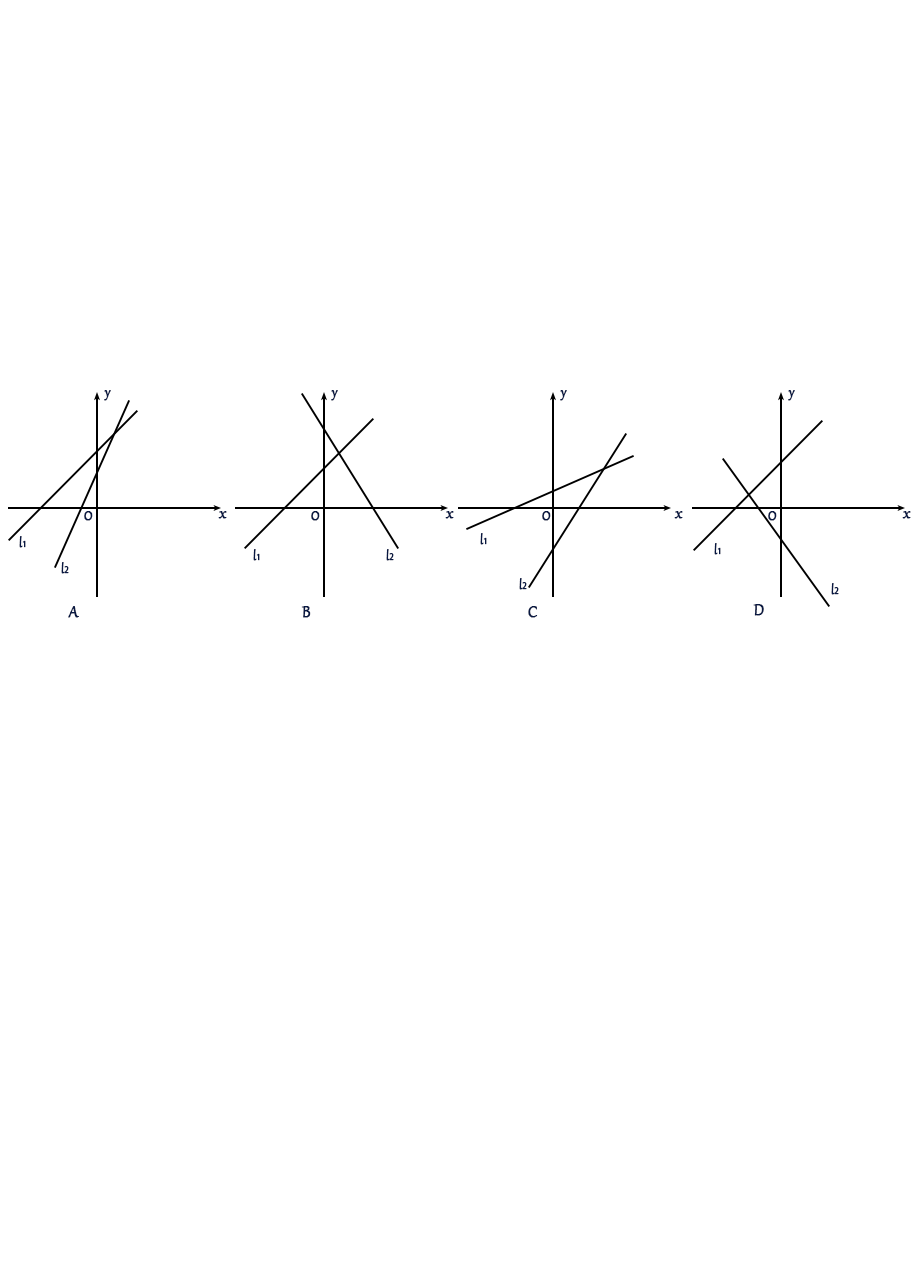
<style>
.page{position:relative;width:916px;height:1268px;background:#ffffff}
.page>*{position:absolute;margin:0}
.t1{font:16px "Gabriola";color:#081842;font-weight:bold}
.t2{font:18.7px "Gabriola";color:#081842;font-weight:bold}
.t3{font:12px "Gabriola";color:#081842;font-weight:bold}
.t4{font:8px "AdobeHeitiStd-Regular";color:#081842;font-weight:bold}
</style>
<div class="page">
<p class="t1" style="left:104px;top:390px;width:7px;height:11px">y</p>
<p class="t1" style="left:331px;top:390px;width:7px;height:11px">y</p>
<p class="t1" style="left:560px;top:390px;width:7px;height:11px">y</p>
<p class="t1" style="left:788px;top:390px;width:7px;height:11px">y</p>
<p class="t1" style="left:84px;top:511px;width:9px;height:10px">O</p>
<p class="t2" style="left:218px;top:511px;width:9px;height:8px">x</p>
<p class="t1" style="left:311px;top:511px;width:9px;height:10px">O</p>
<p class="t2" style="left:445px;top:511px;width:9px;height:8px">x</p>
<p class="t1" style="left:542px;top:511px;width:9px;height:10px">O</p>
<p class="t2" style="left:674px;top:511px;width:9px;height:8px">x</p>
<p class="t1" style="left:768px;top:511px;width:9px;height:10px">O</p>
<p class="t2" style="left:902px;top:511px;width:9px;height:8px">x</p>
<p class="t3" style="left:480px;top:533px;width:7px;height:12px">l<span class="t4">1</span></p>
<p class="t3" style="left:19px;top:536px;width:7px;height:12px">l<span class="t4">1</span></p>
<p class="t3" style="left:714px;top:543px;width:7px;height:12px">l<span class="t4">1</span></p>
<p class="t3" style="left:253px;top:549px;width:7px;height:12px">l<span class="t4">1</span></p>
<p class="t3" style="left:386px;top:549px;width:8px;height:12px">l<span class="t4">2</span></p>
<p class="t3" style="left:61px;top:562px;width:8px;height:12px">l<span class="t4">2</span></p>
<p class="t3" style="left:519px;top:578px;width:8px;height:12px">l<span class="t4">2</span></p>
<p class="t3" style="left:831px;top:583px;width:8px;height:12px">l<span class="t4">2</span></p>
<p class="t2" style="left:68px;top:606px;width:11px;height:12px">A</p>
<p class="t2" style="left:301px;top:606px;width:10px;height:12px">B</p>
<p class="t2" style="left:528px;top:606px;width:10px;height:12px">C</p>
<p class="t2" style="left:753px;top:604px;width:11px;height:12px">D</p>
</div>
